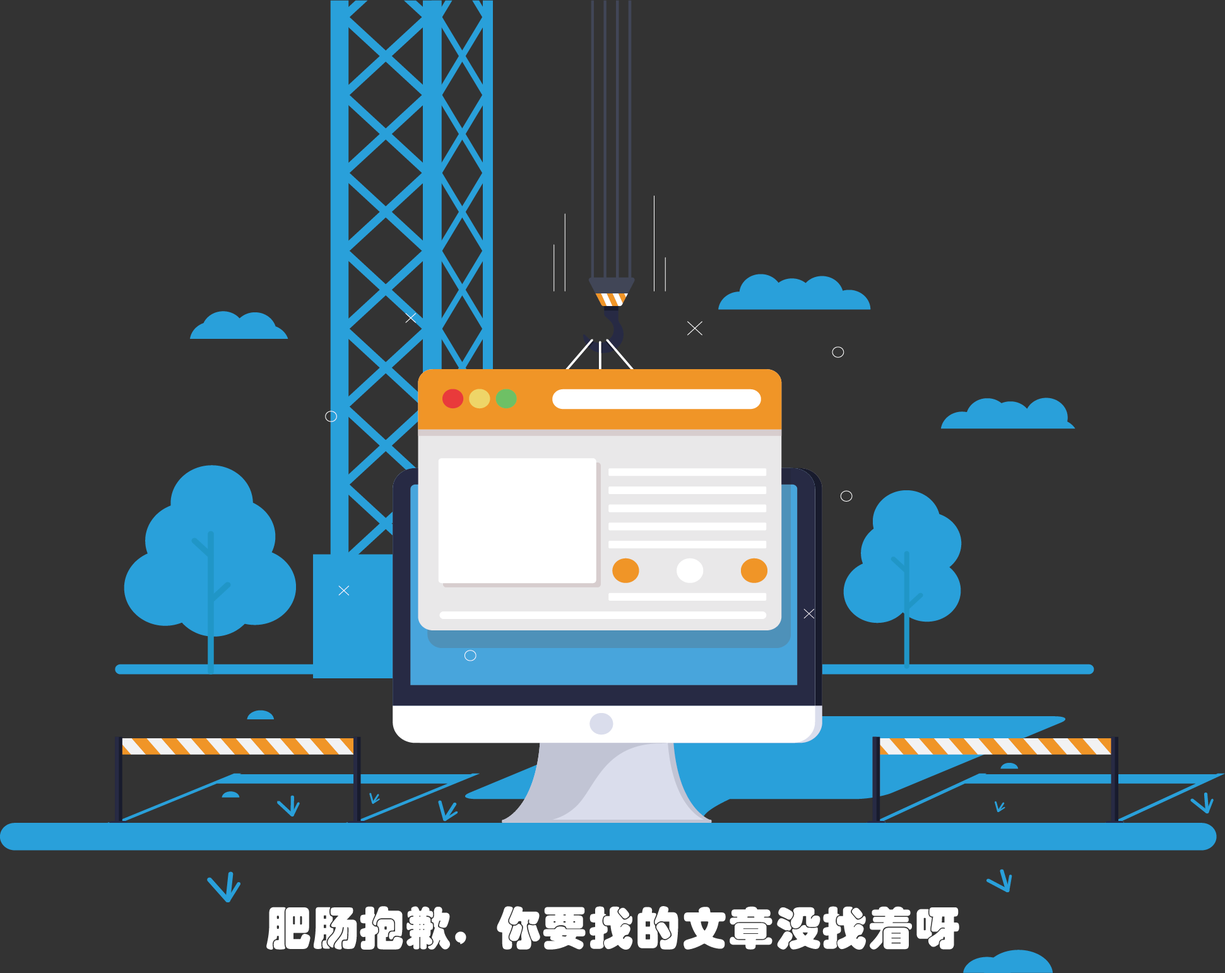
<style>
.page{position:relative;width:1225px;height:973px;background:#333333}
.page>*{position:absolute;margin:0}
.t1{font:45.4px "STHupo";color:#ffffff;font-weight:bold}
</style>
<div class="page">
<p class="t1" style="left:266px;top:906px;width:693px;height:44px">肥肠抱歉,  你要找的文章没找着呀</p>
</div>
